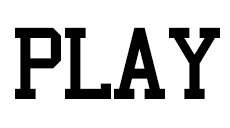
<style>
.page{position:relative;width:230px;height:128px;background:#ffffff}
.page>*{position:absolute;margin:0}
.t1{font:104.2px "College";letter-spacing:-0.06em;color:#000000}
</style>
<div class="page">
<p class="t1" style="left:15px;top:27px;width:205px;height:72px">PLAY</p>
</div>
